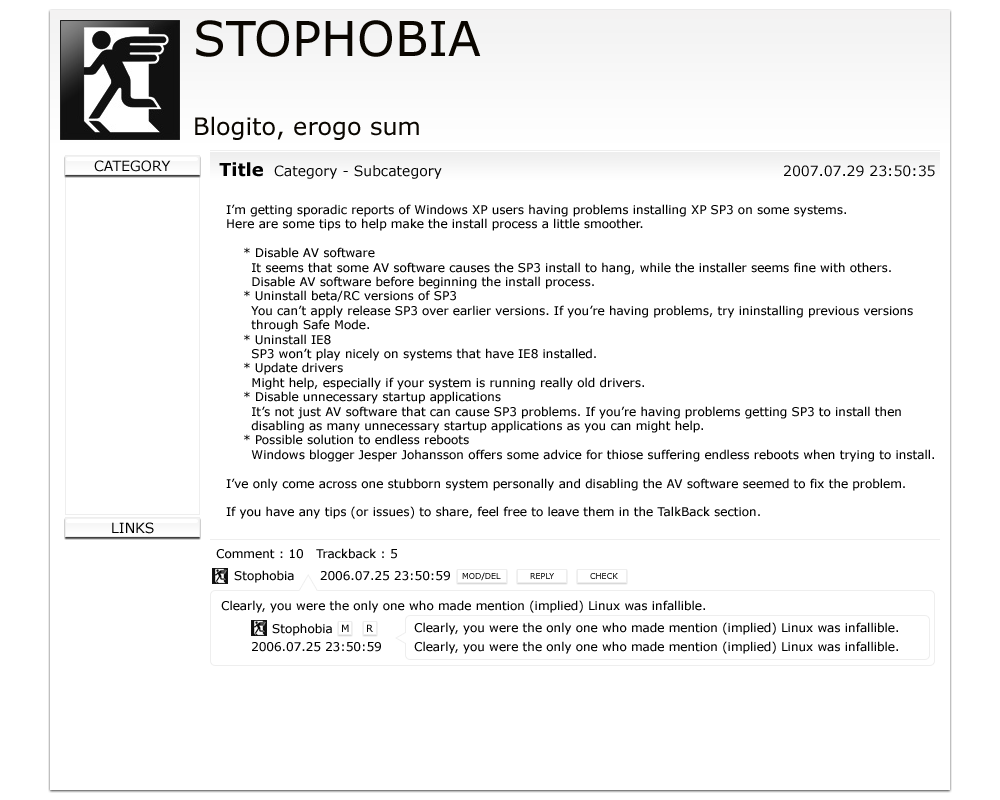
<style>
.page{position:relative;width:1000px;height:800px;background:#ffffff}
.page>*{position:absolute;margin:0}
.t1{font:48px "Verdana";color:#0a0600}
.t2{font:24px "Verdana";color:#0a0600}
.t3{font:14px "Verdana";color:#000000}
.t4{font:18px "Verdana-Bold";color:#000000}
.t5{font:12px "Verdana";color:#000000}
.t6{font:8px "Verdana";color:#000000}
.t7{font:8px "Verdana"}
.t8{font:12px/18px "Verdana";color:#000000}
.t9{font:10px "Verdana";color:#000000}
</style>
<div class="page">
<p class="t1" style="left:196px;top:20px;width:285px;height:37px">STOPHOBIA</p>
<p class="t2" style="left:195px;top:116px;width:224px;height:24px">Blogito, erogo sum</p>
<p class="t3" style="left:94px;top:160px;width:77px;height:12px">CATEGORY</p>
<p class="t4" style="left:219px;top:162px;width:44px;height:15px">Title</p>
<p class="t3" style="left:274px;top:165px;width:168px;height:14px">Category - Subcategory</p>
<p class="t3" style="left:784px;top:165px;width:151px;height:12px">2007.07.29 23:50:35</p>
<p class="t5" style="left:226px;top:204px;width:708px;height:315px">I’m getting sporadic reports of Windows XP users having problems installing XP SP3 on some systems.<br>Here are some tips to help make the install process a little smoother.<br><br>    * Disable AV software<br>      It seems that some AV software causes the SP3 install to hang, while the installer seems fine with others.<br>      Disable AV software before beginning the install process.<br>    * Uninstall beta/RC versions of SP3<br>      You can’t apply release SP3 over earlier versions. If you’re having problems, try ininstalling previous versions<br>      through Safe Mode.<br>    * Uninstall IE8<br>      SP3 won’t play nicely on systems that have IE8 installed.<br>    * Update drivers<br>      Might help, especially if your system is running really old drivers.<br>    * Disable unnecessary startup applications<br>      It’s not just AV software that can cause SP3 problems. If you’re having problems getting SP3 to install then<br>      disabling as many unnecessary startup applications as you can might help.<br>    * Possible solution to endless reboots<br>      Windows blogger Jesper Johansson offers some advice for thiose suffering endless reboots when trying to install.<br><br>I’ve only come across one stubborn system personally and disabling the AV software seemed to fix the problem.<br><br>If you have any tips (or issues) to share, feel free to leave them in the TalkBack section.</p>
<p class="t3" style="left:112px;top:522px;width:42px;height:12px">LINKS</p>
<p class="t5" style="left:216px;top:548px;width:181px;height:11px">Comment : 10   Trackback : 5</p>
<p class="t5" style="left:234px;top:570px;width:216px;height:13px">Stophobia      2006.07.25 23:50:59</p>
<p class="t6" style="left:462px;top:572px;width:39px;height:9px">MOD/DEL</p>
<p class="t7" style="left:530px;top:573px;width:24px;height:6px">REPLY</p>
<p class="t6" style="left:590px;top:573px;width:28px;height:6px">CHECK</p>
<p class="t5" style="left:221px;top:600px;width:484px;height:13px">Clearly, you were the only one who made mention (implied) Linux was infallible.</p>
<p class="t8" style="left:252px;top:623px;width:129px;height:29px">Stophobia<br>2006.07.25 23:50:59</p>
<p class="t9" style="left:342px;top:624px;width:7px;height:8px">M</p>
<p class="t9" style="left:367px;top:624px;width:6px;height:8px">R</p>
<p class="t5" style="left:414px;top:622px;width:484px;height:13px">Clearly, you were the only one who made mention (implied) Linux was infallible.</p>
<p class="t5" style="left:414px;top:641px;width:484px;height:13px">Clearly, you were the only one who made mention (implied) Linux was infallible.</p>
</div>
